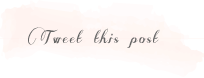
<style>
.page{position:relative;width:204px;height:78px;background:#ffffff}
.page>*{position:absolute;margin:0}
.t1{font:18.2px "SomeWeatzSwashes";letter-spacing:0.1em;color:#666666}
</style>
<div class="page">
<p class="t1" style="left:28px;top:27px;width:132px;height:21px">Tweet this post</p>
</div>
